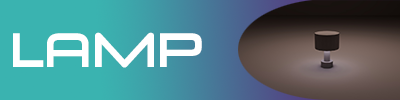
<style>
.page{position:relative;width:400px;height:100px;background:#3ab3b0}
.page>*{position:absolute;margin:0}
.t1{font:45.8px "VenusRising-Regular";color:#ffffff}
</style>
<div class="page">
<p class="t1" style="left:13px;top:32px;width:189px;height:36px">Lamp</p>
</div>
